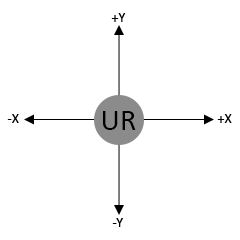
<style>
.page{position:relative;width:240px;height:240px;background:#ffffff}
.page>*{position:absolute;margin:0}
.t1{font:14px "Calibri";color:#000000}
</style>
<div class="page">
<p class="t1" style="left:111px;top:13px;width:15px;height:9px">+Y</p>
<p class="t1" style="left:7px;top:114px;width:12px;height:9px">-X</p>
<p class="t1" style="left:217px;top:114px;width:15px;height:9px">+X</p>
<p class="t1" style="left:112px;top:218px;width:11px;height:9px">-Y</p>
</div>
